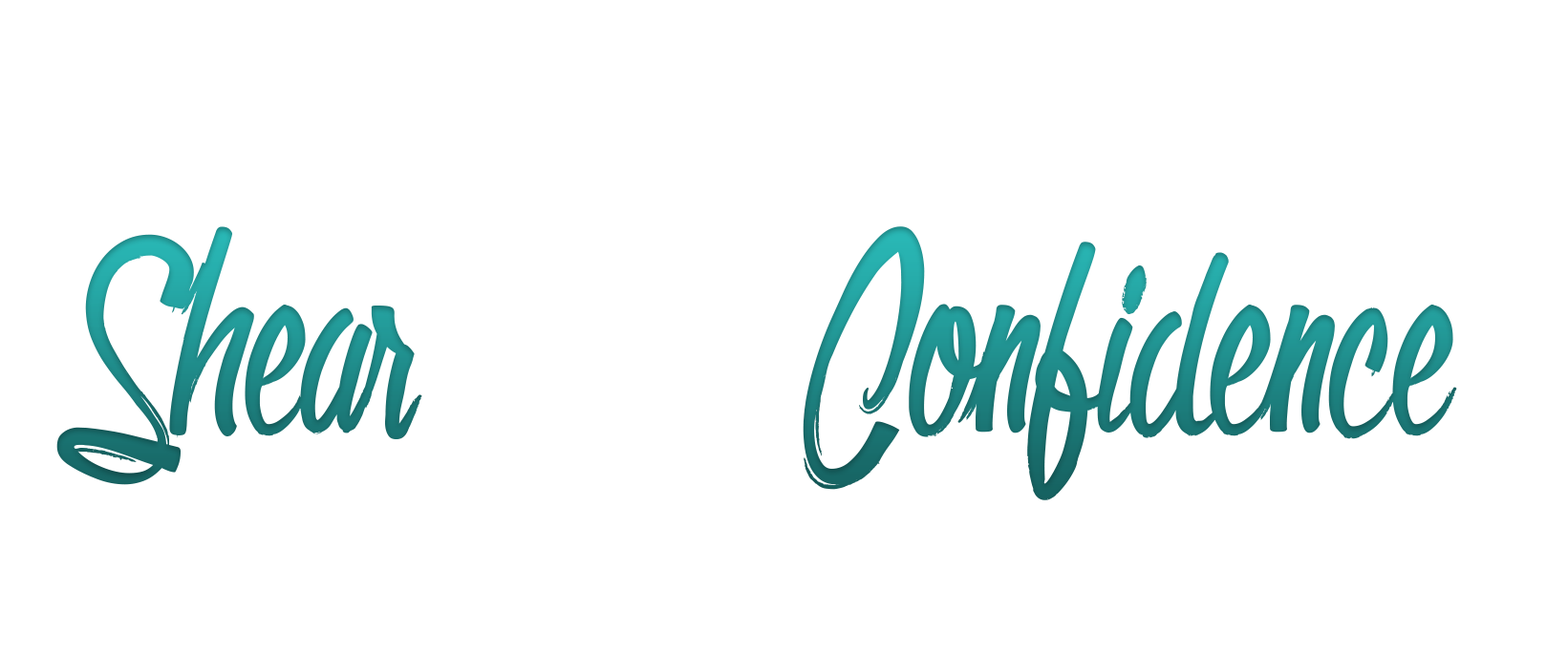
<style>
.page{position:relative;width:1568px;height:655px;background:#ffffff}
.page>*{position:absolute;margin:0}
.t1{font:358.3px "OlympicBranding"}
</style>
<div class="page">
<p class="t1" style="left:56px;top:226px;width:1401px;height:275px">Shear         Confidence</p>
</div>
